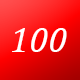
<style>
.page{position:relative;width:80px;height:80px}
.page>*{position:absolute;margin:0}
.t1{font:36px "Cambria-Italic";color:#ffffff}
</style>
<div class="page">
<p class="t1" style="left:12px;top:28px;width:55px;height:24px">100</p>
</div>
